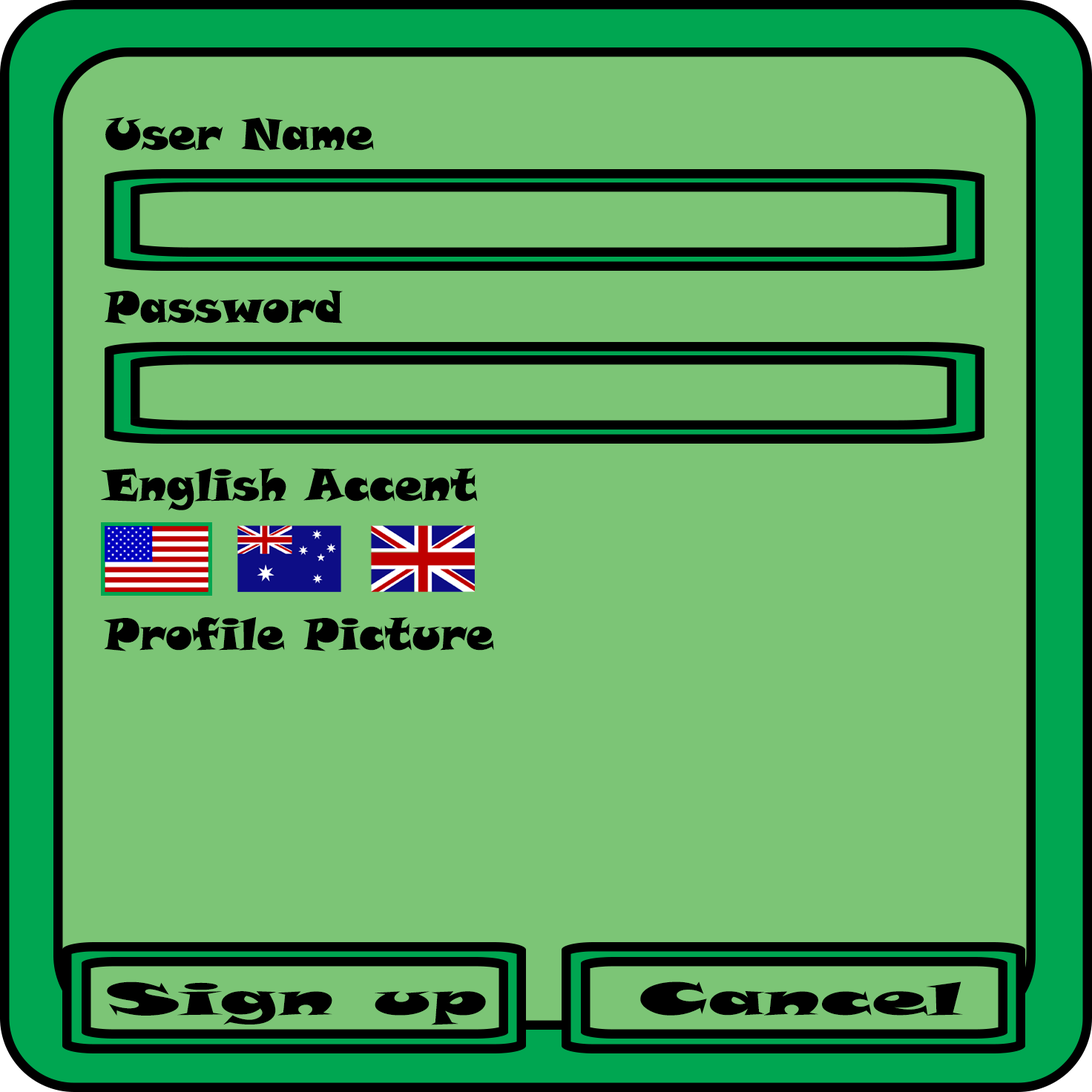
<style>
.page{position:relative;width:1092px;height:1092px;background:#7cc576}
.page>*{position:absolute;margin:0}
.t1{font:44px "SnapITC-Regular";color:#000000}
.t2{font:44.5px "SnapITC-Regular";color:#000000;scale:2 1}
</style>
<div class="page">
<p class="t1" style="left:105px;top:116px;width:269px;height:35px">User Name</p>
<p class="t1" style="left:104px;top:290px;width:239px;height:34px">Password</p>
<p class="t1" style="left:100px;top:467px;width:378px;height:43px">English Accent</p>
<p class="t1" style="left:103px;top:616px;width:391px;height:35px">Profile Picture</p>
<p class="t2" style="left:107px;top:981px;width:379px;height:44px">Sign up</p>
<p class="t2" style="left:640px;top:981px;width:323px;height:35px">Cancel</p>
</div>
